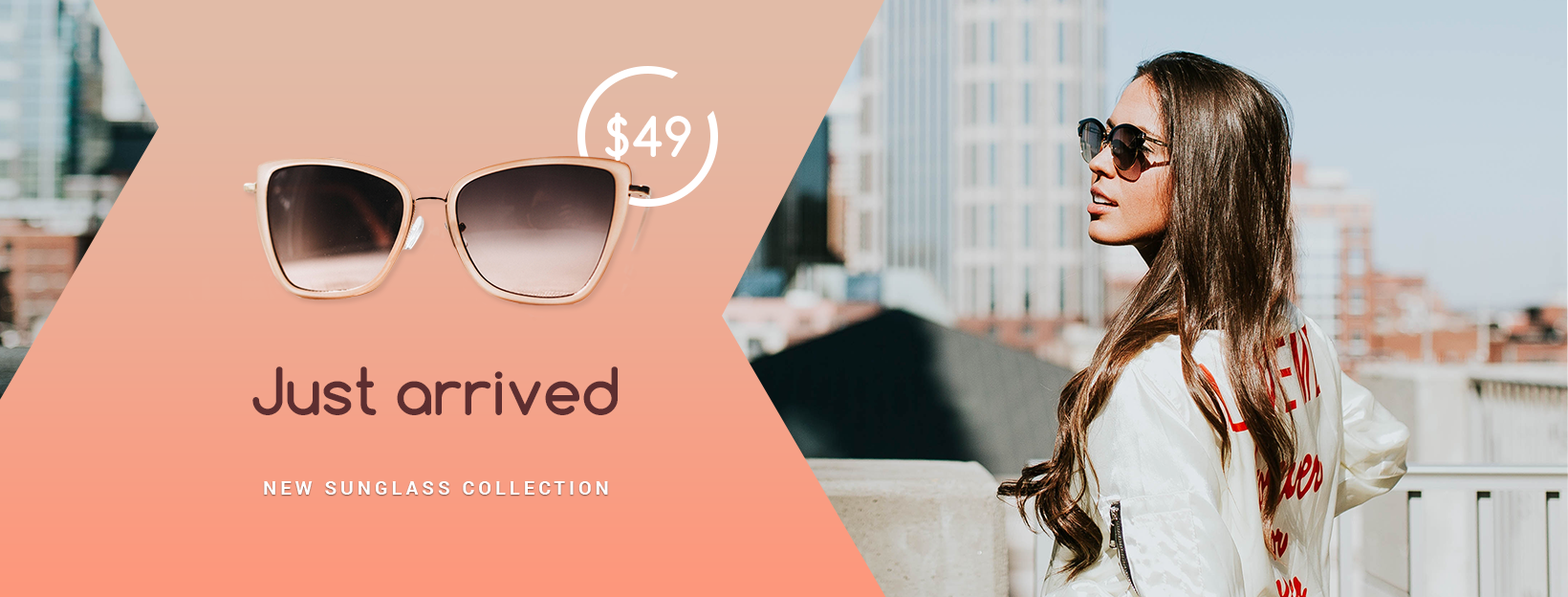
<style>
.page{position:relative;width:1568px;height:597px}
.page>*{position:absolute;margin:0}
.t1{font:52.6px "Comfortaa-Bold";color:#ffffff}
.t2{font:62.1px "Comfortaa-Bold";color:#5d2e30}
.t3{font:19.1px "Roboto-Bold";letter-spacing:0.2em;color:#ffffff;text-transform:uppercase}
</style>
<div class="page">
<p class="t1" style="left:605px;top:112px;width:86px;height:49px">$49</p>
<p class="t2" style="left:252px;top:366px;width:366px;height:49px">Just arrived</p>
<p class="t3" style="left:264px;top:481px;width:344px;height:13px">New sunglass Collection</p>
</div>
